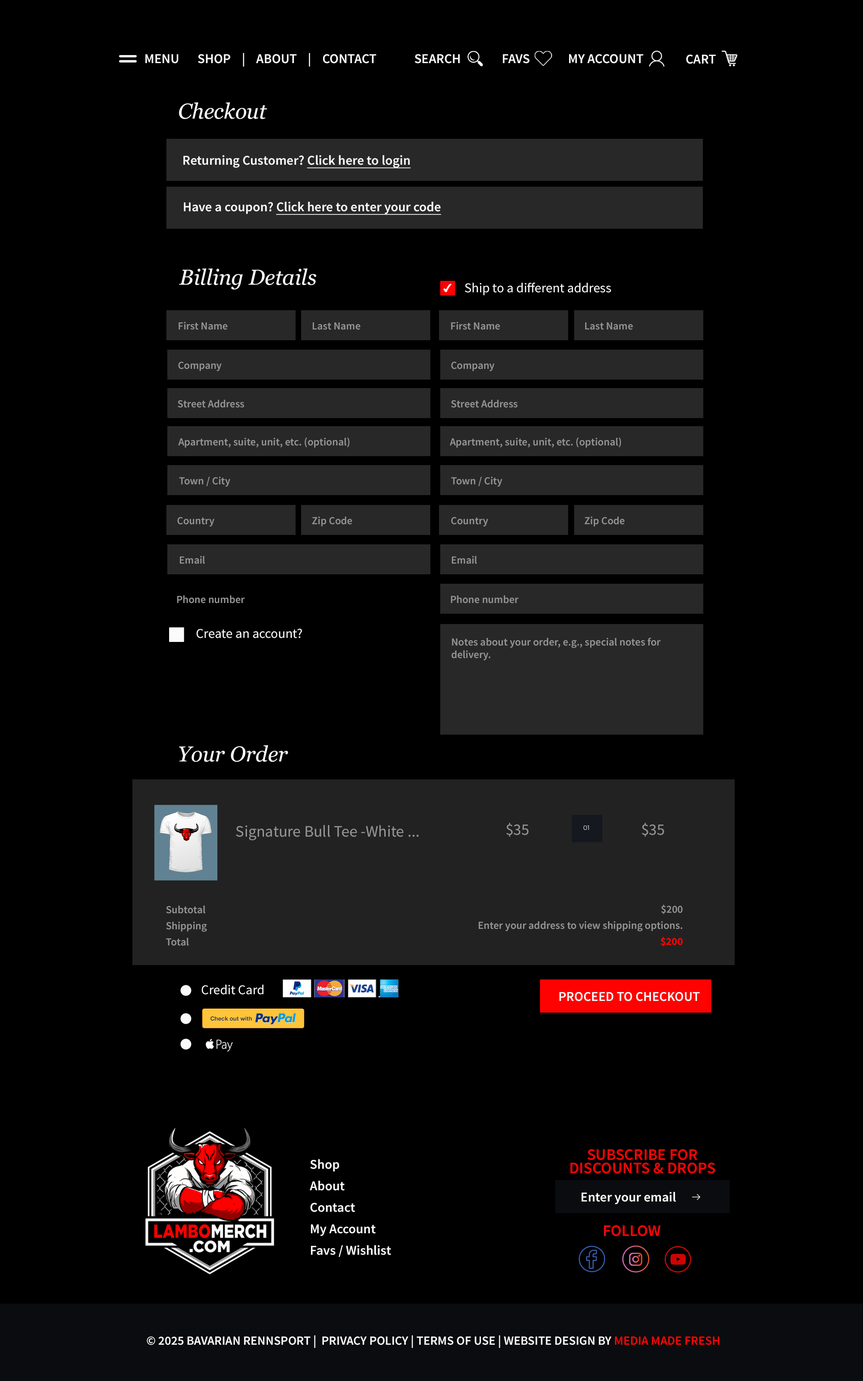
<style>
.page{position:relative;width:863px;height:1381px;background:#000000}
.page>*{position:absolute;margin:0}
.t1{font:13.4px "SourceSansPro-Semibold";color:#fcfafa}
.t2{font:21.5px "Georgia-Italic";color:#fcfafa}
.t3{font:13.4px "SourceSansPro-Semibold";color:#fcfafa;text-decoration:underline}
.t4{font:10.4px "ArialUnicodeMS";color:#fcfafa}
.t5{font:13.4px "SourceSansPro-Regular";color:#fcfafa}
.t6{font:10.7px "SourceSansPro-Semibold";color:#959595}
.t7{font:16.1px "SourceSansPro-Regular";color:#959595}
.t8{font:10.7px/16.1px "SourceSansPro-Semibold";color:#959595}
.t9{font:10.7px/16.1px "SourceSansPro-Bold";color:#fd0101}
.t10{font:13.4px "SourceSansPro-Regular";color:#fbf9f9}
.t11{font:16.1px/13.4px "SourceSansPro-Semibold";color:#fc0404}
.t12{font:13.4px/21.5px "SourceSansPro-Semibold";color:#fcfafa}
.t13{font:13.4px "SourceSansPro-Semibold";color:#fefefe}
.t14{font:16.1px "SourceSansPro-Semibold";color:#fc0404}
.t15{font:12.5px "SourceSansPro-Semibold";color:#fcfafa}
.t16{font:12.5px "SourceSansPro-Semibold";color:#fc0404}
</style>
<div class="page">
<p class="t1" style="left:198px;top:53px;width:178px;height:14px">SHOP    |    ABOUT    |    CONTACT</p>
<p class="t1" style="left:145px;top:54px;width:34px;height:10px">MENU</p>
<p class="t1" style="left:415px;top:54px;width:45px;height:10px">SEARCH</p>
<p class="t1" style="left:503px;top:54px;width:27px;height:10px">FAVS</p>
<p class="t1" style="left:569px;top:54px;width:75px;height:10px">MY ACCOUNT</p>
<p class="t1" style="left:687px;top:55px;width:29px;height:9px">CART</p>
<p class="t2" style="left:179px;top:102px;width:88px;height:17px">Checkout</p>
<p class="t1" style="left:184px;top:155px;width:227px;height:13px">Returning Customer? <span class="t3">Click here to login</span></p>
<p class="t3" style="left:184px;top:201px;width:257px;height:14px"><span class="t1">Have a coupon? </span>Click here to enter your code</p>
<p class="t2" style="left:179px;top:268px;width:137px;height:22px">Billing Details</p>
<p class="t4" style="left:444px;top:284px;width:8px;height:8px">✔︎</p>
<p class="t5" style="left:465px;top:282px;width:146px;height:13px">Ship to a different address</p>
<p class="t6" style="left:179px;top:322px;width:49px;height:8px">First Name</p>
<p class="t6" style="left:313px;top:322px;width:48px;height:8px">Last Name</p>
<p class="t6" style="left:451px;top:322px;width:49px;height:8px">First Name</p>
<p class="t6" style="left:586px;top:322px;width:47px;height:8px">Last Name</p>
<p class="t6" style="left:178px;top:362px;width:44px;height:9px">Company</p>
<p class="t6" style="left:451px;top:362px;width:44px;height:9px">Company</p>
<p class="t6" style="left:178px;top:400px;width:66px;height:8px">Street Address</p>
<p class="t6" style="left:451px;top:400px;width:67px;height:8px">Street Address</p>
<p class="t6" style="left:178px;top:437px;width:172px;height:11px">Apartment, suite, unit, etc. (optional)</p>
<p class="t6" style="left:450px;top:437px;width:171px;height:11px">Apartment, suite, unit, etc. (optional)</p>
<p class="t6" style="left:179px;top:477px;width:52px;height:10px">Town / City</p>
<p class="t6" style="left:451px;top:477px;width:52px;height:10px">Town / City</p>
<p class="t6" style="left:177px;top:517px;width:37px;height:9px">Country</p>
<p class="t6" style="left:312px;top:517px;width:40px;height:9px">Zip Code</p>
<p class="t6" style="left:451px;top:517px;width:37px;height:9px">Country</p>
<p class="t6" style="left:585px;top:517px;width:40px;height:9px">Zip Code</p>
<p class="t6" style="left:180px;top:556px;width:25px;height:8px">Email</p>
<p class="t6" style="left:452px;top:556px;width:25px;height:8px">Email</p>
<p class="t6" style="left:177px;top:595px;width:68px;height:8px">Phone number</p>
<p class="t6" style="left:451px;top:595px;width:68px;height:8px">Phone number</p>
<p class="t5" style="left:197px;top:628px;width:105px;height:10px">Create an account?</p>
<p class="t6" style="left:452px;top:637px;width:209px;height:23px">Notes about your order, e.g., special notes for <br>delivery.</p>
<p class="t2" style="left:179px;top:745px;width:109px;height:17px">Your Order</p>
<p class="t7" style="left:236px;top:825px;width:183px;height:15px">Signature Bull Tee -White ...</p>
<p class="t7" style="left:506px;top:823px;width:23px;height:14px">$35</p>
<p class="t7" style="left:642px;top:823px;width:23px;height:14px">$35</p>
<p class="t8" style="left:166px;top:906px;width:41px;height:40px">Subtotal<br>Shipping<br>Total</p>
<p class="t8" style="left:479px;top:905px;width:204px;height:41px;text-align:right">$200<br>Enter your address to view shipping options.<br><span class="t9">$200</span></p>
<p class="t10" style="left:202px;top:984px;width:62px;height:11px">Credit Card</p>
<p class="t1" style="left:560px;top:992px;width:140px;height:9px">PROCEED TO CHECKOUT</p>
<p class="t11" style="left:571px;top:1149px;width:145px;height:25px;text-align:center">SUBSCRIBE FOR<br>DISCOUNTS &amp; DROPS</p>
<p class="t12" style="left:310px;top:1159px;width:81px;height:98px">Shop<br>About<br>Contact<br>My Account<br>Favs / Wishlist</p>
<p class="t13" style="left:582px;top:1192px;width:94px;height:12px">Enter your email</p>
<p class="t14" style="left:604px;top:1225px;width:57px;height:11px">FOLLOW</p>
<p class="t15" style="left:147px;top:1335px;width:573px;height:13px">© 2025 BAVARIAN RENNSPORT |  PRIVACY POLICY | TERMS OF USE | WEBSITE DESIGN BY <span class="t16">MEDIA MADE FRESH</span></p>
</div>
